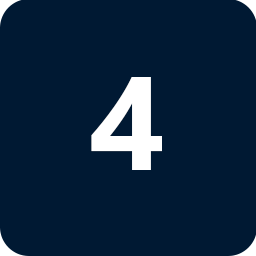
<style>
.page{position:relative;width:256px;height:256px;background:#001933}
.page>*{position:absolute;margin:0}
.t1{font:133.3px "LeelawadeeUI-Bold";color:#ffffff}
</style>
<div class="page">
<p class="t1" style="left:91px;top:77px;width:71px;height:93px">4</p>
</div>
